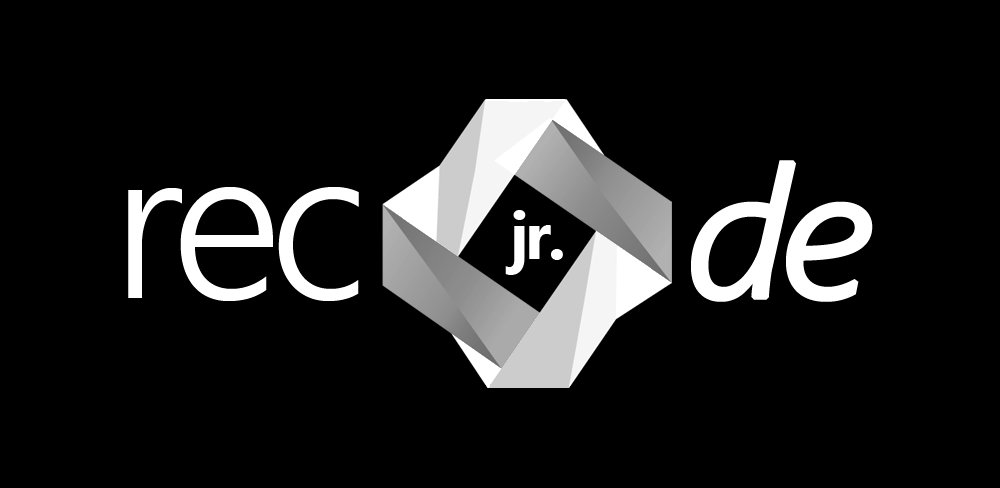
<style>
.page{position:relative;width:1000px;height:488px;background:#000000}
.page>*{position:absolute;margin:0}
.t1{font:180.9px "SegoeUI-SemilightItalic";letter-spacing:-0.07em;color:#ffffff;font-weight:bold;scale:1.07 1}
.t2{font:216px "SegoeUI-Semilight";letter-spacing:-0.06em;color:#ffffff}
.t3{font:65.6px "MicrosoftTaiLe-Bold";letter-spacing:-0.05em;color:#ffffff}
</style>
<div class="page">
<p class="t1" style="left:691px;top:160px;width:182px;height:142px">de</p>
<p class="t2" style="left:128px;top:187px;width:231px;height:114px">rec</p>
<p class="t3" style="left:505px;top:210px;width:58px;height:65px">jr.</p>
</div>
